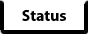
<style>
.page{position:relative;width:88px;height:34px;background:#ffffff}
.page>*{position:absolute;margin:0}
.t1{font:16px "MyriadPro-Bold";color:#000000}
</style>
<div class="page">
<p class="t1" style="left:22px;top:10px;width:44px;height:11px">Status</p>
</div>
